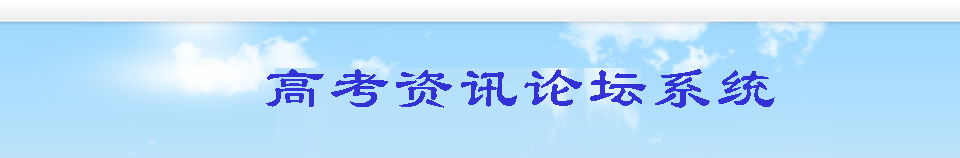
<style>
.page{position:relative;width:960px;height:158px}
.page>*{position:absolute;margin:0}
.t1{font:60px "LiSu";letter-spacing:0.075em;color:#3232d7}
</style>
<div class="page">
<p class="t1" style="left:266px;top:69px;width:509px;height:39px">高考资讯论坛系统</p>
</div>
